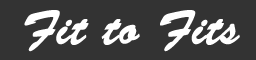
<style>
.page{position:relative;width:256px;height:60px;background:#333333}
.page>*{position:absolute;margin:0}
.t1{font:48px "BrushScriptStd";color:#ffffff;font-weight:bold}
</style>
<div class="page">
<p class="t1" style="left:24px;top:10px;width:216px;height:42px">Fit to Fits</p>
</div>
